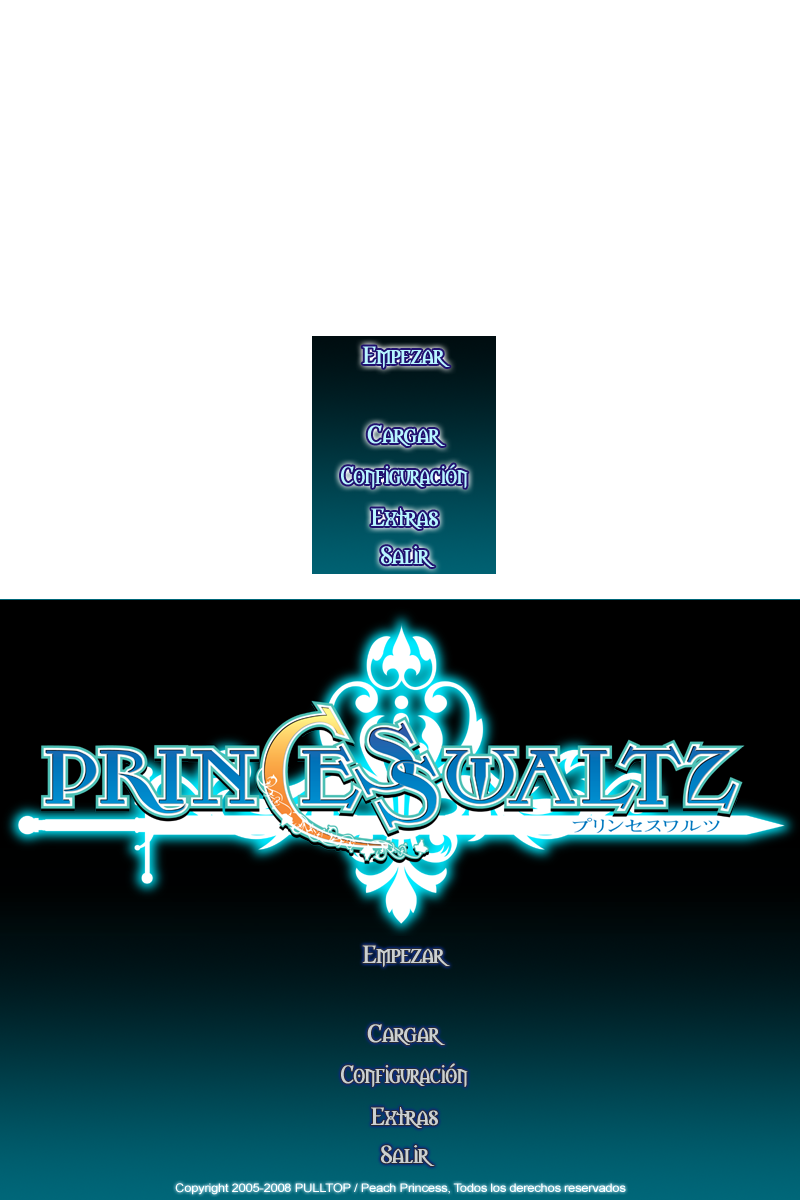
<style>
.page{position:relative;width:800px;height:1200px;background:#ffffff}
.page>*{position:absolute;margin:0}
.t1{font:23px "Morpheus";letter-spacing:-0.03em;color:#b8f6ff;font-weight:bold}
.t2{font:23px "Morpheus";letter-spacing:-0.03em;color:#b8f6ff;font-weight:bold;scale:0.89 1}
.t3{font:23px "Morpheus";letter-spacing:-0.03em;color:#ccd0d1;font-weight:bold}
.t4{font:23px "Morpheus";letter-spacing:-0.03em;color:#ccd0d1;font-weight:bold;scale:0.89 1}
.t5{font:11.8px "ArialMT";letter-spacing:-0.03em;color:#ffffff;scale:1.12 1}
</style>
<div class="page">
<p class="t1" style="left:362px;top:346px;width:88px;height:22px">Empezar</p>
<p class="t1" style="left:367px;top:425px;width:78px;height:21px">Cargar</p>
<p class="t2" style="left:341px;top:464px;width:127px;height:24px">Configuración</p>
<p class="t1" style="left:371px;top:508px;width:67px;height:21px">Extras</p>
<p class="t1" style="left:381px;top:546px;width:54px;height:21px">Salir</p>
<p class="t3" style="left:362px;top:945px;width:88px;height:22px">Empezar</p>
<p class="t3" style="left:367px;top:1024px;width:78px;height:21px">Cargar</p>
<p class="t4" style="left:341px;top:1063px;width:127px;height:24px">Configuración</p>
<p class="t3" style="left:371px;top:1107px;width:67px;height:21px">Extras</p>
<p class="t3" style="left:381px;top:1145px;width:54px;height:21px">Salir</p>
<p class="t5" style="left:175px;top:1183px;width:451px;height:12px">Copyright 2005-2008 PULLTOP / Peach Princess, Todos los derechos reservados</p>
</div>
